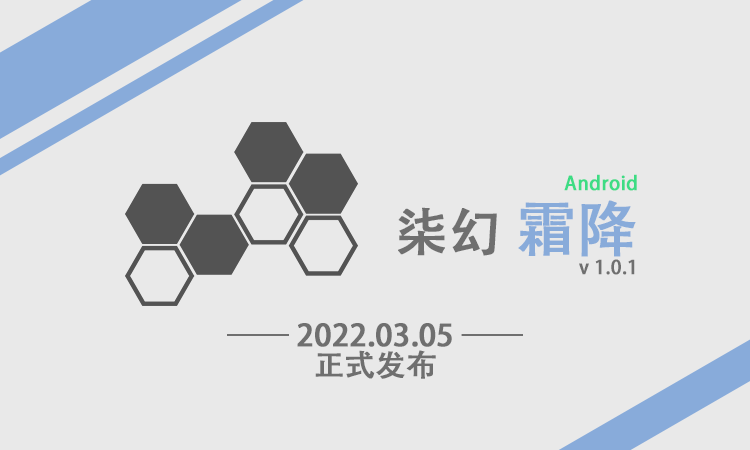
<style>
.page{position:relative;width:750px;height:450px;background:#e9e9e9}
.page>*{position:absolute;margin:0}
.t1{font:19px/24px "AdobeHeitiStd-Regular";color:#3ddc84;font-weight:bold}
.t2{font:52px/60px "AdobeHeitiStd-Regular";color:#6f6f6f;font-weight:bold}
.t3{font:60px/60px "AdobeHeitiStd-Regular";color:#88abda;font-weight:bold}
.t4{font:19px/60px "AdobeHeitiStd-Regular";color:#6f6f6f;font-weight:bold}
.t5{font:30px/30px "AdobeHeitiStd-Regular";color:#6f6f6f;font-weight:bold}
</style>
<div class="page">
<p class="t1" style="left:398px;top:174px;width:239px;height:101px;text-align:right">Android <br><span class="t2">柒幻 </span><span class="t3">霜降<br></span><span class="t4">v 1.0.1</span></p>
<p class="t5" style="left:227px;top:323px;width:296px;height:56px;text-align:center">—— 2022.03.05 ——<br>正式发布</p>
</div>
